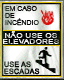
<style>
.page{position:relative;width:64px;height:80px}
.page>*{position:absolute;margin:0}
.t1{font:7px/7px "ArialMT";letter-spacing:0.02em;text-transform:uppercase;scale:0.96 1}
.t2{font:7.3px/6px "ArialMT";color:#f7f7f7;font-weight:bold;scale:1.11 1}
.t3{font:7.4px/7px "ArialMT";font-weight:bold}
</style>
<div class="page">
<p class="t1" style="left:5px;top:5px;width:34px;height:21px">EM CASO<br>de<br>Incêndio</p>
<p class="t2" style="left:3px;top:31px;width:56px;height:13px;text-align:center">NÃO USE OS<br>ELEVADORES</p>
<p class="t3" style="left:4px;top:61px;width:36px;height:14px">USE AS<br>ESCADAS</p>
</div>
